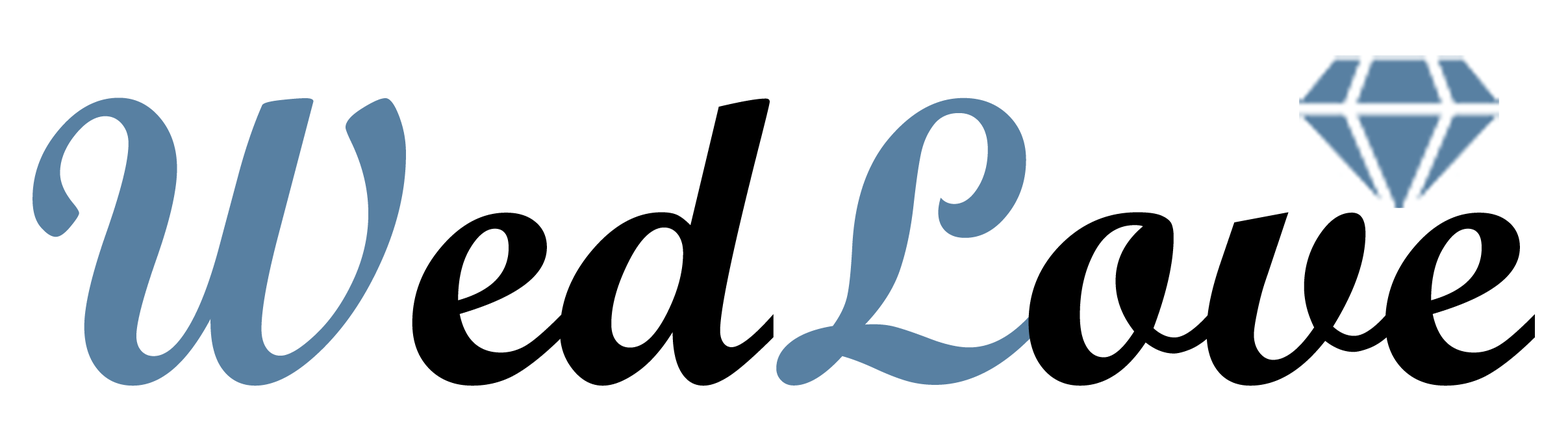
<style>
.page{position:relative;width:1568px;height:446px;background:#ffffff}
.page>*{position:absolute;margin:0}
.t1{font:406px "ScriptMTBold";color:#000000}
.t2{font:406px "ScriptMTBold";color:#5880a2}
</style>
<div class="page">
<p class="t1" style="left:32px;top:97px;width:1503px;height:289px"><span class="t2">W</span>ed<span class="t2">L</span>ove</p>
</div>
